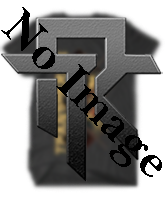
<style>
.page{position:relative;width:165px;height:200px;background:#ffffff}
.page>*{position:absolute;margin:0}
.t1{font:50px "BellMTBold";color:#000000}
</style>
<div class="page">
<p class="t1" style="left:1px;top:7px;width:161px;height:170px;rotate:45deg">No Image</p>
</div>
